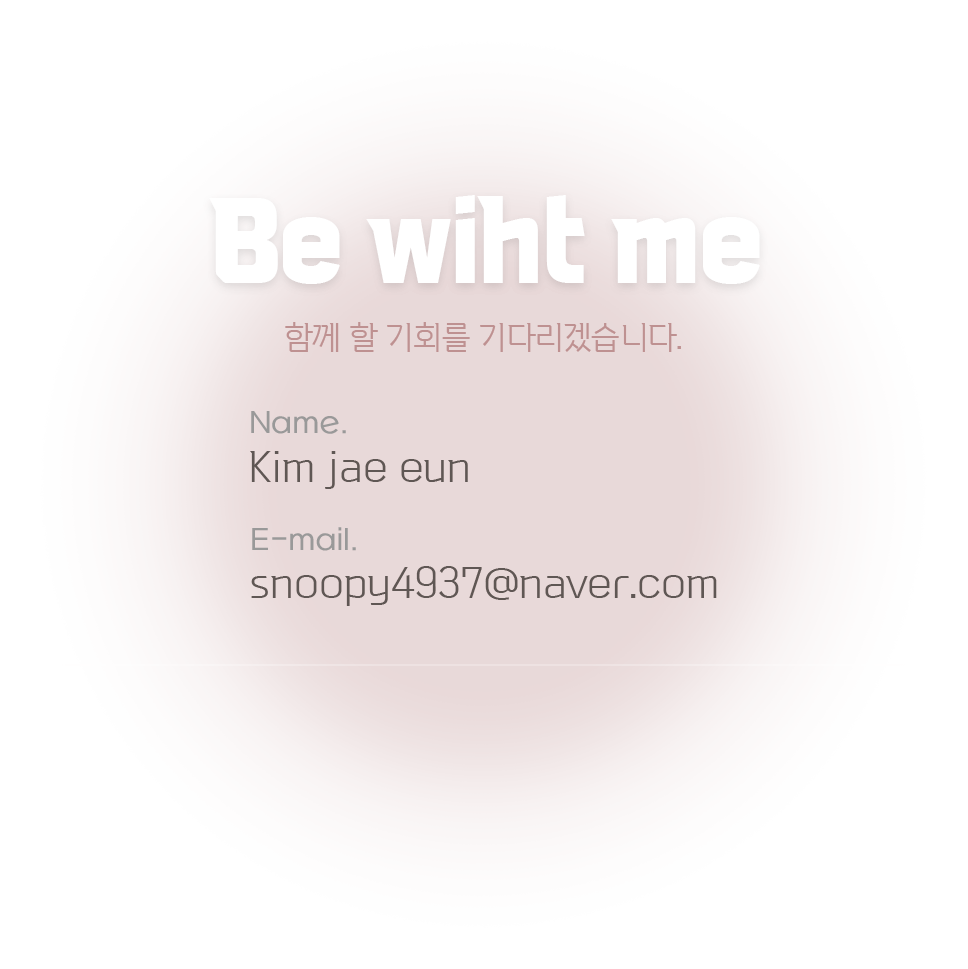
<style>
.page{position:relative;width:968px;height:969px;background:#ffffff}
.page>*{position:absolute;margin:0}
.t1{font:98.7px "VITRO-CORE-TTF";color:#ffffff}
.t2{font:32.9px "VITRO-PRIDE-TTF";color:#be9191}
.t3{font:42.3px "VITRO-PRIDE-TTF";color:#5f5754}
.t4{font:28.2px "SBAggroL";color:#999999}
</style>
<div class="page">
<p class="t1" style="left:209px;top:195px;width:551px;height:89px">Be wiht me</p>
<p class="t2" style="left:285px;top:322px;width:396px;height:30px">함께 할 기회를 기다리겠습니다.</p>
<p class="t3" style="left:250px;top:411px;width:218px;height:78px"><span class="t4">Name.<br></span>Kim jae eun</p>
<p class="t3" style="left:251px;top:527px;width:466px;height:79px"><span class="t4">E-mail.<br></span>snoopy4937@naver.com</p>
</div>
